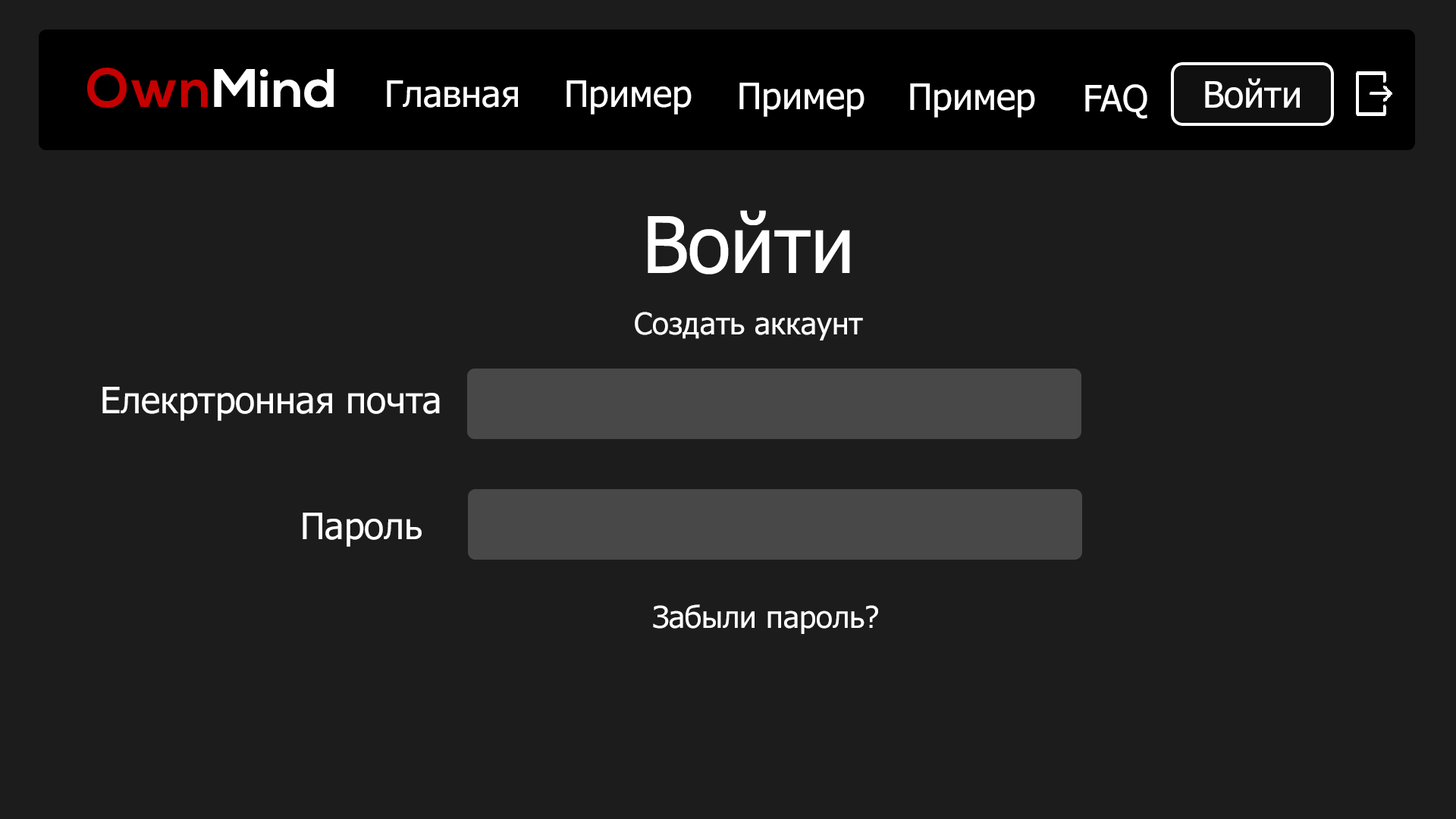
<style>
.page{position:relative;width:1456px;height:819px;background:#1c1c1c}
.page>*{position:absolute;margin:0}
.t1{font:54.6px "NexaBold";color:#ffffff}
.t2{font:54.6px "NexaBold";color:#c50000}
.t3{font:36.4px "Tahoma";color:#ffffff}
.t4{font:78.1px "Tahoma";color:#ffffff}
.t5{font:30.3px "Tahoma";color:#ffffff}
</style>
<div class="page">
<p class="t1" style="left:87px;top:67px;width:247px;height:41px"><span class="t2">Own</span>Mind</p>
<p class="t3" style="left:387px;top:80px;width:131px;height:28px">Главная</p>
<p class="t3" style="left:566px;top:80px;width:126px;height:35px">Пример</p>
<p class="t3" style="left:739px;top:83px;width:125px;height:34px">Пример</p>
<p class="t3" style="left:910px;top:83px;width:125px;height:35px">Пример</p>
<p class="t3" style="left:1085px;top:84px;width:62px;height:35px">FAQ</p>
<p class="t3" style="left:1205px;top:78px;width:95px;height:30px">Войти</p>
<p class="t4" style="left:648px;top:210px;width:202px;height:65px">Войти</p>
<p class="t5" style="left:635px;top:312px;width:228px;height:28px">Создать аккаунт</p>
<p class="t3" style="left:102px;top:387px;width:338px;height:34px">Елекртронная почта</p>
<p class="t3" style="left:303px;top:513px;width:119px;height:34px">Пароль</p>
<p class="t5" style="left:653px;top:604px;width:225px;height:30px">Забыли пароль?</p>
</div>
